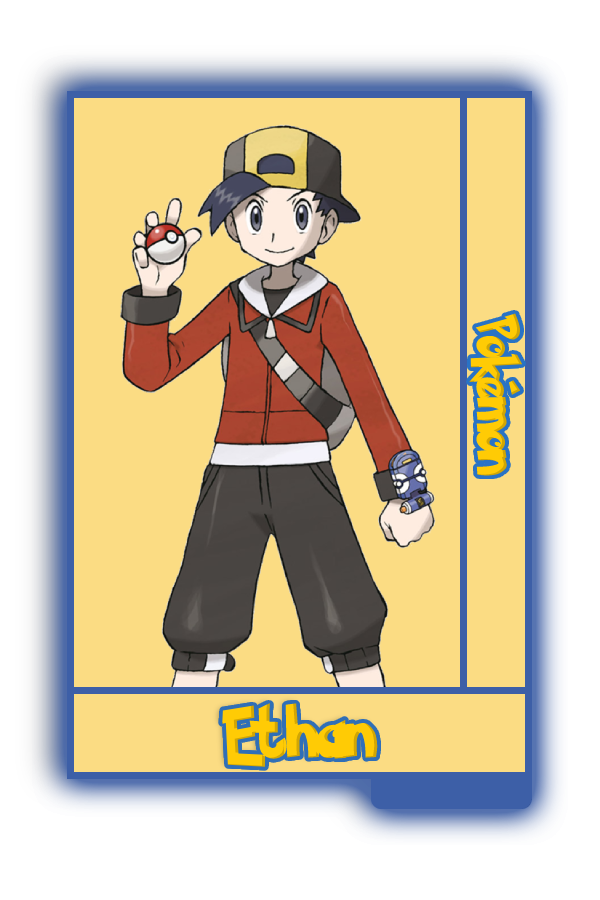
<style>
.page{position:relative;width:600px;height:900px;background:#fbdc83}
.page>*{position:absolute;margin:0}
.t1{font:48.8px "PokemonSolidNormal";color:#ffcb05;scale:0.8 1}
.t2{font:56.6px "PokemonSolidNormal";color:#ffcb05;scale:0.92 1}
</style>
<div class="page">
<p class="t1" style="left:469px;top:313px;width:54px;height:163px;rotate:90deg">Pokémon</p>
<p class="t2" style="left:222px;top:703px;width:156px;height:64px">Ethan</p>
</div>
